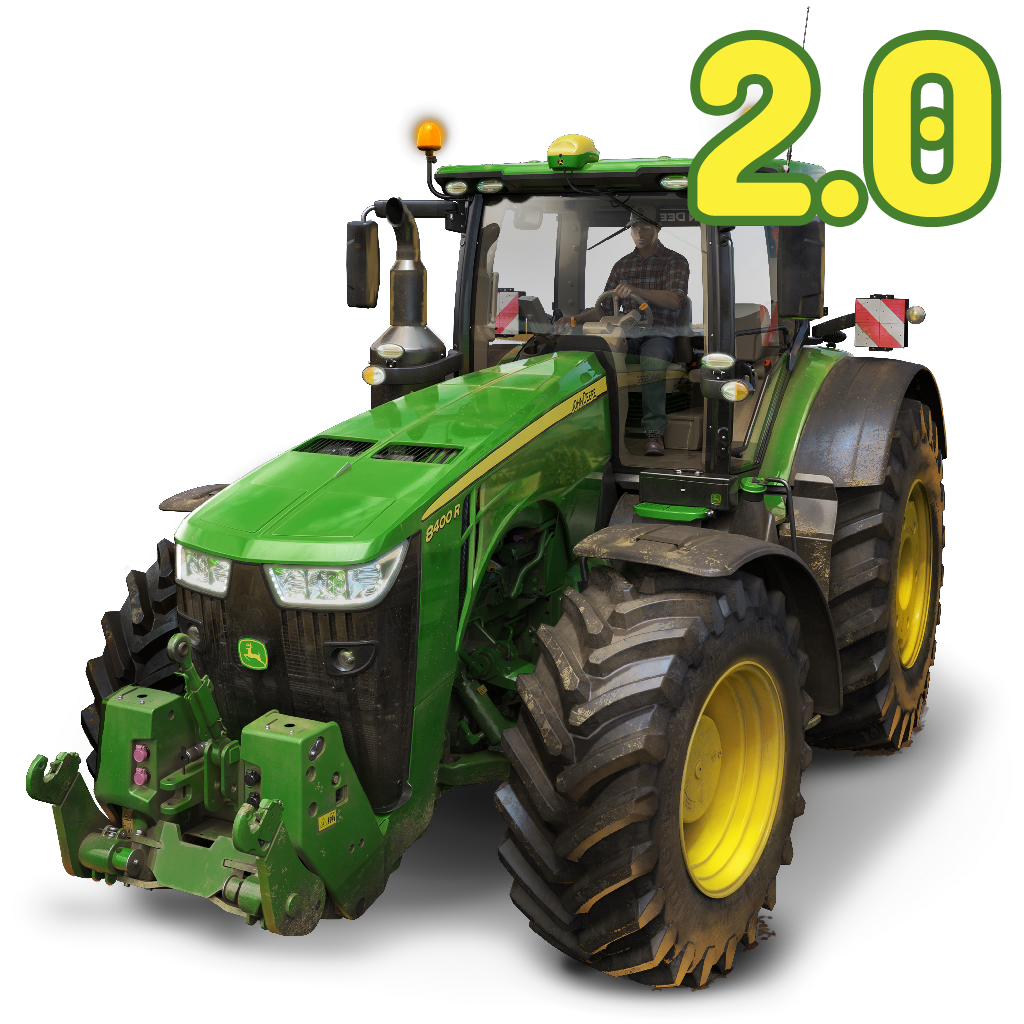
<style>
.page{position:relative;width:1024px;height:1024px;background:#ffffff}
.page>*{position:absolute;margin:0}
.t1{font:240px "Dosis-ExtraBold";color:#fcef37}
</style>
<div class="page">
<p class="t1" style="left:697px;top:40px;width:295px;height:177px">2.0</p>
</div>
